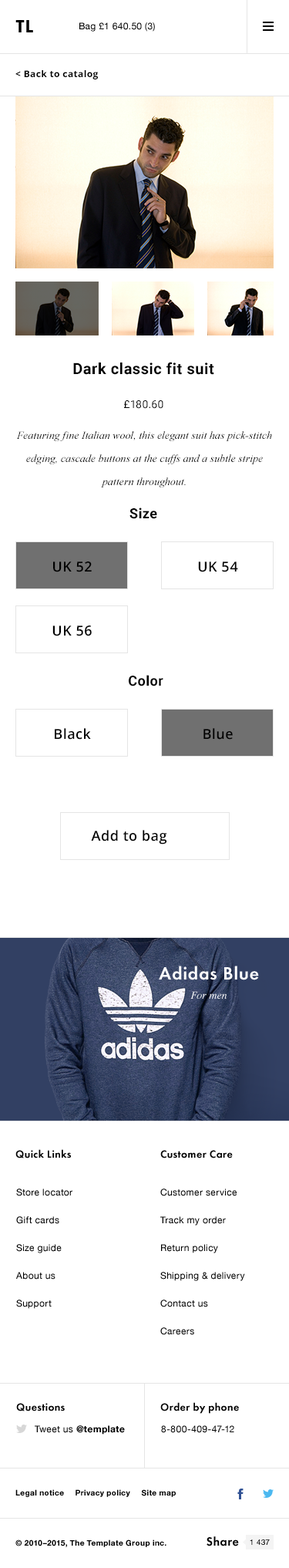
<style>
.page{position:relative;width:289px;height:1568px;background:#ffffff}
.page>*{position:absolute;margin:0}
.t1{font:18.5px "FuturaPT-Heavy";letter-spacing:0.03em;color:#000000;text-transform:uppercase}
.t2{font:9.3px "HelveticaNeue";letter-spacing:0.03em;color:#000000}
.t3{font:9.3px "OpenSans-Bold";letter-spacing:0.03em;color:#000000}
.t4{font:15.4px "Roboto-Bold";letter-spacing:0.03em;color:#000000}
.t5{font:10.8px "Roboto-Regular";letter-spacing:0.03em;color:#000000}
.t6{font:10.8px/23.1px "TimesNewRomanPS-ItalicMT";color:#000000}
.t7{font:13.9px "Roboto-Bold";letter-spacing:0.03em;color:#000000}
.t8{font:13.9px "OpenSans-Semibold";letter-spacing:0.03em;color:#000000}
.t9{font:18.5px "FuturaPT-Demi";letter-spacing:0.03em;color:#ffffff}
.t10{font:10.8px "Times-Italic";color:#ffffff}
.t11{font:10.8px "FuturaPT-Demi";letter-spacing:0.03em;color:#000000}
.t12{font:9.3px/27.8px "HelveticaNeue";letter-spacing:0.03em;color:#000000}
.t13{font:9.3px "HelveticaNeue-Bold";letter-spacing:0.03em;color:#000000}
.t14{font:7.7px "HelveticaNeue-Bold";letter-spacing:0.03em;color:#000000}
.t15{font:12.3px "FuturaPT-Demi";letter-spacing:0.03em;color:#000000}
.t16{font:7.7px "HelveticaNeue";letter-spacing:0.03em;color:#000000}
</style>
<div class="page">
<p class="t1" style="left:15px;top:20px;width:18px;height:12px">tl</p>
<p class="t2" style="left:79px;top:22px;width:76px;height:10px">Bag £1 640.50 (3)</p>
<p class="t3" style="left:15px;top:70px;width:83px;height:9px">&lt; Back to catalog</p>
<p class="t4" style="left:73px;top:362px;width:141px;height:13px">Dark classic fit suit</p>
<p class="t5" style="left:124px;top:400px;width:40px;height:9px">£180.60</p>
<p class="t6" style="left:16px;top:431px;width:256px;height:56px;text-align:center">Featuring fine Italian wool, this elegant suit has pick-stitch edging, cascade buttons at the cuffs and a subtle stripe pattern throughout.</p>
<p class="t7" style="left:130px;top:507px;width:27px;height:12px">Size</p>
<p class="t8" style="left:53px;top:561px;width:39px;height:11px">UK 52</p>
<p class="t8" style="left:198px;top:561px;width:40px;height:11px">UK 54</p>
<p class="t8" style="left:52px;top:626px;width:40px;height:10px">UK 56</p>
<p class="t7" style="left:129px;top:675px;width:35px;height:11px">Color</p>
<p class="t8" style="left:55px;top:728px;width:36px;height:12px">Black</p>
<p class="t8" style="left:204px;top:728px;width:29px;height:12px">Blue</p>
<p class="t8" style="left:91px;top:830px;width:76px;height:15px">Add to bag</p>
<p class="t9" style="left:159px;top:966px;width:100px;height:14px">Adidas Blue</p>
<p class="t10" style="left:191px;top:991px;width:37px;height:8px">For men</p>
<p class="t11" style="left:15px;top:1149px;width:56px;height:9px">Quick Links</p>
<p class="t11" style="left:160px;top:1150px;width:73px;height:8px">Customer Care</p>
<p class="t12" style="left:16px;top:1189px;width:56px;height:120px">Store locator<br>Gift cards<br>Size guide<br>About us<br>Support</p>
<p class="t12" style="left:160px;top:1189px;width:85px;height:146px">Customer service<br>Track my order<br>Return policy<br>Shipping &amp; delivery<br>Contact us<br>Careers</p>
<p class="t11" style="left:16px;top:1403px;width:49px;height:8px">Questions</p>
<p class="t11" style="left:160px;top:1402px;width:79px;height:12px">Order by phone</p>
<p class="t13" style="left:35px;top:1425px;width:90px;height:10px"><span class="t2">Tweet us </span>@template</p>
<p class="t2" style="left:161px;top:1425px;width:73px;height:8px">8-800-409-47-12</p>
<p class="t14" style="left:15px;top:1489px;width:161px;height:8px">Legal notice     Privacy policy     Site map</p>
<p class="t14" style="left:15px;top:1539px;width:152px;height:8px">© 2010–2015, The Template Group inc.</p>
<p class="t15" style="left:207px;top:1536px;width:32px;height:10px">Share</p>
<p class="t16" style="left:250px;top:1539px;width:20px;height:6px">1 437</p>
</div>
